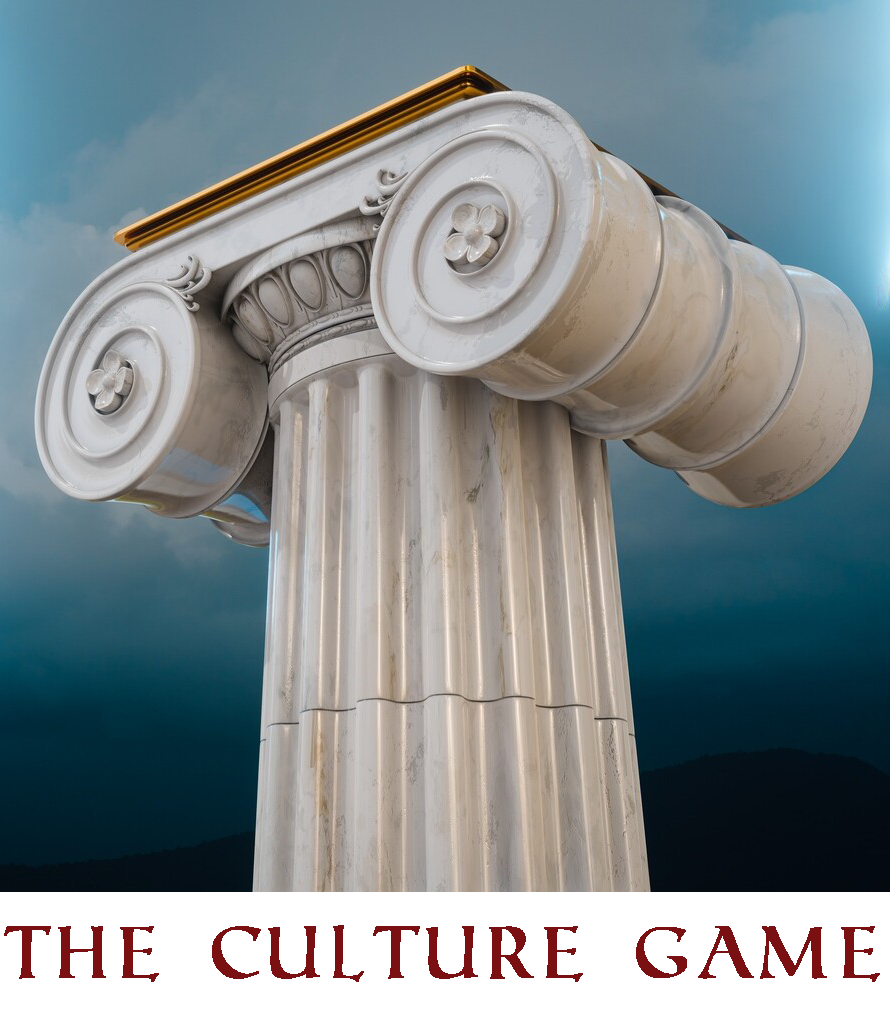
<style>
.page{position:relative;width:890px;height:1012px}
.page>*{position:absolute;margin:0}
.t1{font:73.1px "RomanSD";color:#7a1012;font-weight:bold}
</style>
<div class="page">
<p class="t1" style="left:4px;top:925px;width:876px;height:57px">The culture Game</p>
</div>
